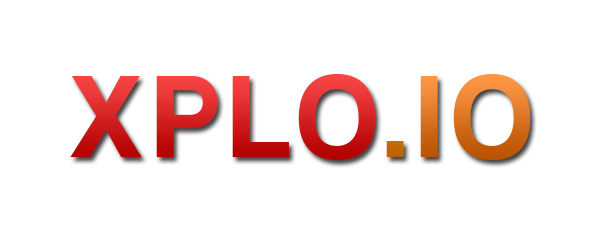
<style>
.page{position:relative;width:600px;height:250px;background:#ffffff}
.page>*{position:absolute;margin:0}
.t1{font:120px "CoolveticaRg-Regular";letter-spacing:0.1em}
</style>
<div class="page">
<p class="t1" style="left:70px;top:74px;width:461px;height:86px">XPLO.IO</p>
</div>
